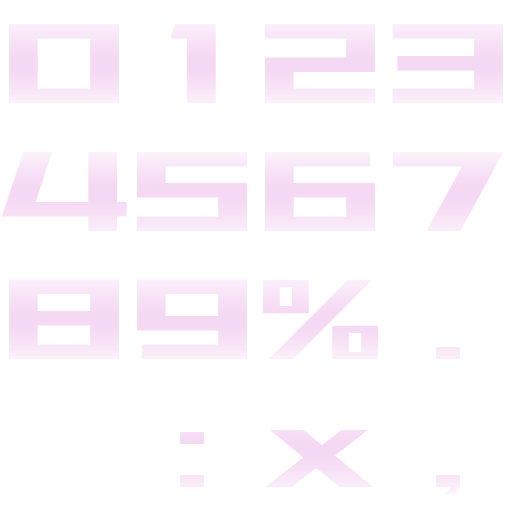
<style>
.page{position:relative;width:512px;height:512px;background:#ffffff}
.page>*{position:absolute;margin:0}
.t1{font:120px/128px "2051PLASTIC-ALP50";color:#f7e1f6}
.t2{font:120px/128px "2051PLASTIC-ALP50";color:#f8e4f7}
.t3{font:120px/128px "2051PLASTIC-ALP50";color:#f8e2f6}
.t4{font:120px/128px "2051PLASTIC-ALP50";color:#f9e7f7}
</style>
<div class="page">
<p class="t1" style="left:1px;top:23px;width:126px;height:337px;text-align:center">0<br>4<br>8</p>
<p class="t2" style="left:137px;top:23px;width:110px;height:464px;text-align:center">1<br>5<br>9<br>:</p>
<p class="t3" style="left:263px;top:23px;width:115px;height:465px;text-align:center">2<br>6<br>%<br>x</p>
<p class="t4" style="left:392px;top:23px;width:112px;height:472px;text-align:center">3<br>7<br>.<br>,</p>
</div>
